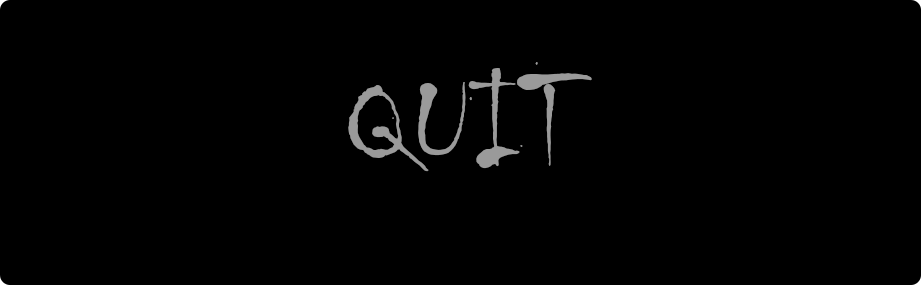
<style>
.page{position:relative;width:921px;height:285px;background:#000000}
.page>*{position:absolute;margin:0}
.t1{font:141.7px "Chiller-Regular";color:#9a9a9a}
</style>
<div class="page">
<p class="t1" style="left:348px;top:62px;width:244px;height:110px">QUIT</p>
</div>
